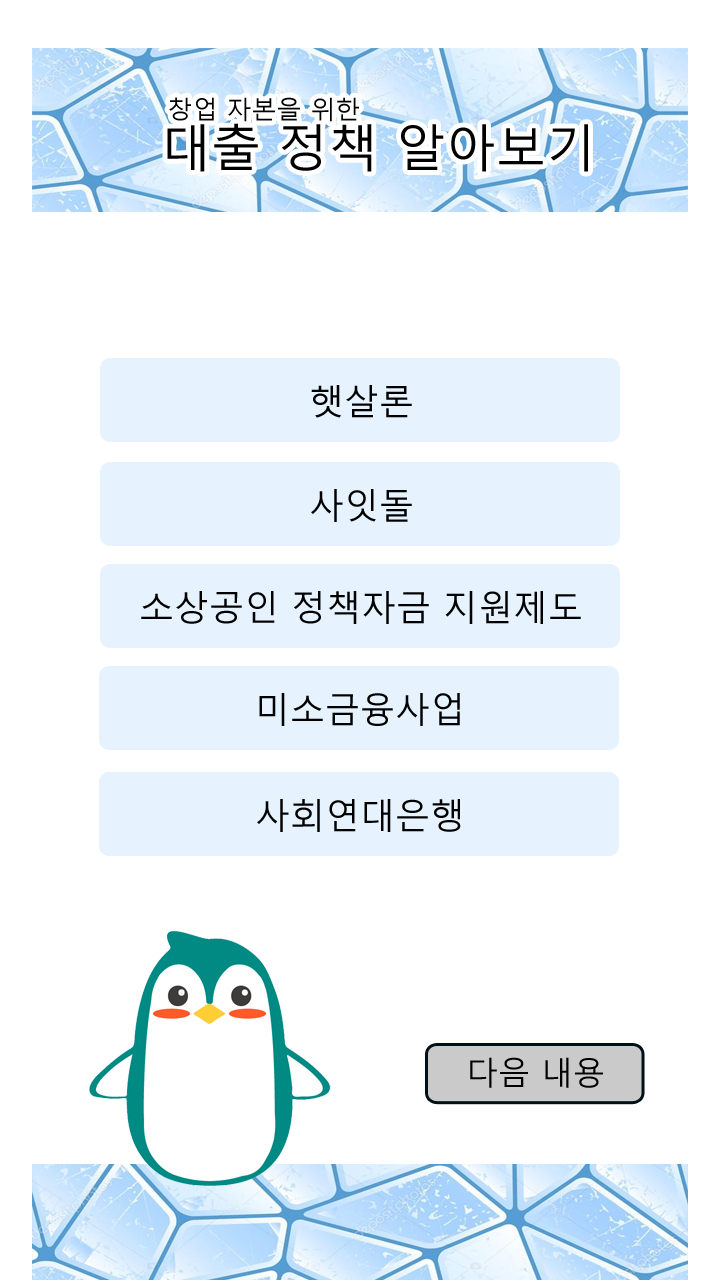
<style>
.page{position:relative;width:720px;height:1280px;background:#ffffff}
.page>*{position:absolute;margin:0}
.t1{font:50px/26px "MalgunGothic";color:#000000}
.t2{font:25px/26px "MalgunGothic";color:#000000}
.t3{font:35px "MalgunGothic";color:#000000}
.t4{font:32px "MalgunGothic";color:#000000}
</style>
<div class="page">
<p class="t1" style="left:167px;top:97px;width:421px;height:75px;text-align:center"><span class="t2">창업 자본을 위한<br></span>             대출 정책 알아보기</p>
<p class="t3" style="left:311px;top:385px;width:101px;height:33px">햇살론</p>
<p class="t3" style="left:311px;top:489px;width:101px;height:33px">사잇돌</p>
<p class="t3" style="left:141px;top:591px;width:440px;height:33px">소상공인 정책자금 지원제도</p>
<p class="t3" style="left:259px;top:693px;width:201px;height:33px">미소금융사업</p>
<p class="t3" style="left:257px;top:799px;width:204px;height:33px">사회연대은행</p>
<p class="t4" style="left:470px;top:1057px;width:133px;height:31px">다음 내용</p>
</div>
